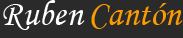
<style>
.page{position:relative;width:183px;height:38px;background:#2a2a2a}
.page>*{position:absolute;margin:0}
.t1{font:36px "MonotypeCorsiva";color:#ffffff}
.t2{font:36px "MonotypeCorsiva";color:#fc9b00}
</style>
<div class="page">
<p class="t1" style="left:3px;top:0px;width:82px;height:30px">Ruben</p>
<p class="t2" style="left:91px;top:3px;width:92px;height:26px">Cantón</p>
</div>
